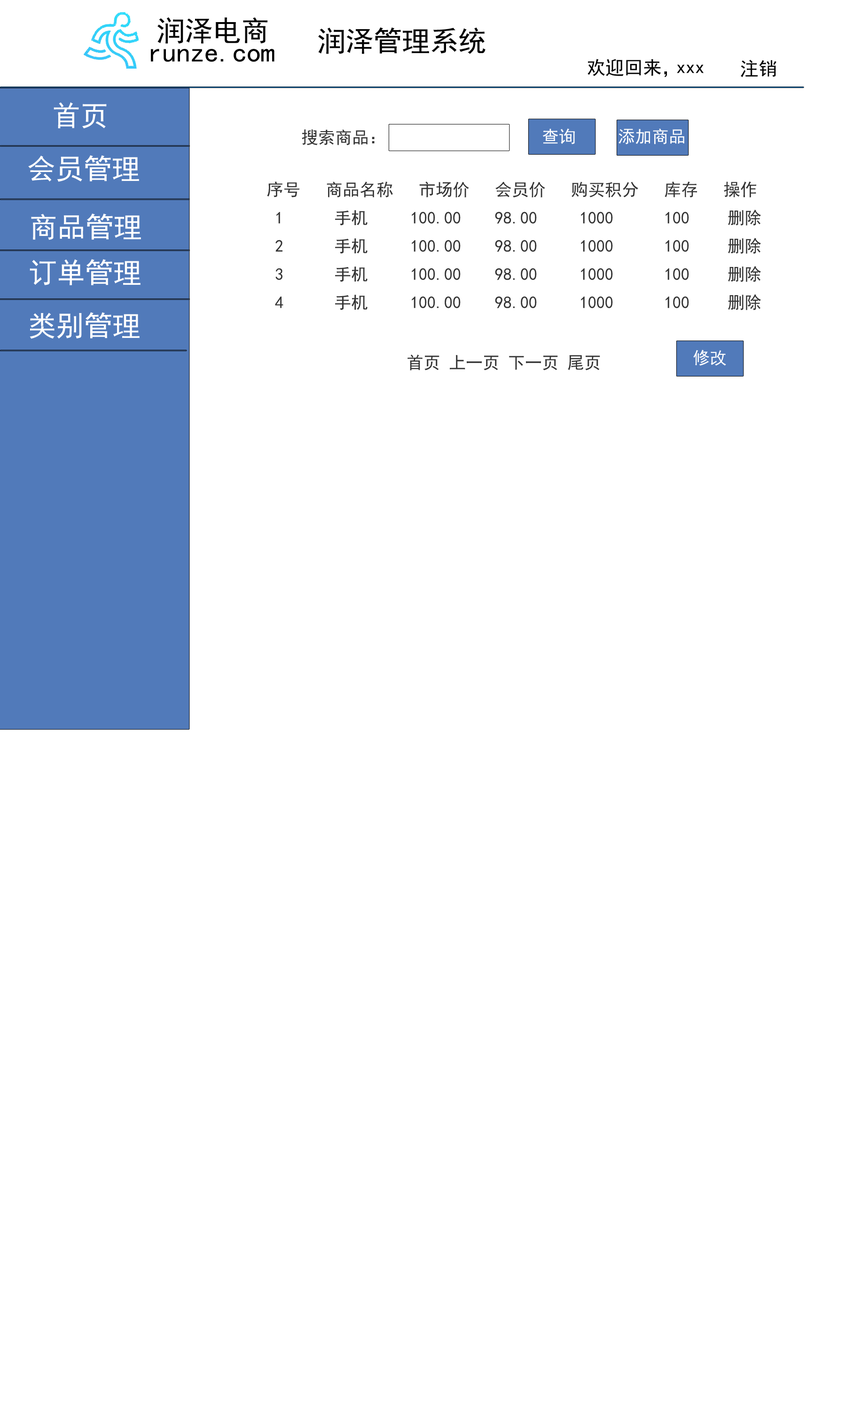
<style>
.page{position:relative;width:846px;height:1410px;background:#ffffff}
.page>*{position:absolute;margin:0}
.t1{font:28.2px "SimHei";color:#010101}
.t2{font:18.8px "SimHei";color:#000000}
.t3{font:28.2px "SimHei";color:#ffffff}
.t4{font:16.9px "SimHei";color:#333333}
.t5{font:16.9px "SimHei";color:#ffffff}
.t6{font:16.9px/14.1px "SimHei";color:#333333}
.t7{font:28.2px "SimHei";color:#fefefe}
.t8{font:16.9px "SimHei";color:#fefefe}
</style>
<div class="page">
<p class="t1" style="left:157px;top:17px;width:110px;height:27px">润泽电商</p>
<p class="t1" style="left:318px;top:27px;width:167px;height:27px">润泽管理系统</p>
<p class="t1" style="left:151px;top:49px;width:123px;height:13px">runze.com</p>
<p class="t2" style="left:587px;top:59px;width:80px;height:18px">欢迎回来，</p>
<p class="t2" style="left:677px;top:64px;width:26px;height:9px">xxx</p>
<p class="t2" style="left:741px;top:60px;width:35px;height:18px">注销</p>
<p class="t3" style="left:54px;top:102px;width:53px;height:26px">首页</p>
<p class="t4" style="left:302px;top:129px;width:73px;height:16px">搜索商品：</p>
<p class="t5" style="left:542px;top:128px;width:142px;height:16px">查询     添加商品</p>
<p class="t3" style="left:28px;top:155px;width:111px;height:27px">会员管理</p>
<p class="t6" style="left:267px;top:181px;width:494px;height:129px">序号   商品名称   市场价   会员价   购买积分   库存   操作<br><br>  1      手机     100.00    98.00     1000      100    删除<br><br>  2      手机     100.00    98.00     1000      100    删除<br>   <br>  3      手机     100.00    98.00     1000      100    删除<br><br>  4      手机     100.00    98.00     1000      100    删除</p>
<p class="t3" style="left:31px;top:213px;width:110px;height:27px">商品管理</p>
<p class="t3" style="left:30px;top:259px;width:111px;height:26px">订单管理</p>
<p class="t7" style="left:30px;top:312px;width:110px;height:27px">类别管理</p>
<p class="t8" style="left:693px;top:350px;width:33px;height:16px">修改</p>
<p class="t4" style="left:407px;top:354px;width:193px;height:16px">首页 上一页 下一页 尾页</p>
</div>
